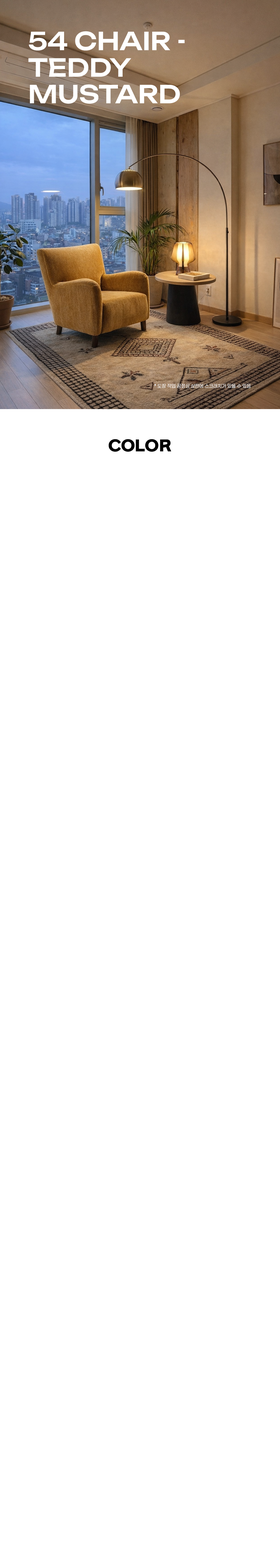
<style>
.page{position:relative;width:280px;height:1568px;background:#ffffff}
.page>*{position:absolute;margin:0}
.t1{font:24.5px/26.6px "Unbounded-Medium";color:#ffffff}
.t2{font:4.7px "Paperlogy-3Light";letter-spacing:0.02em;color:#ffffff}
.t3{font:14.9px "SBAggroB";color:#000000}
</style>
<div class="page">
<p class="t1" style="left:28px;top:31px;width:157px;height:73px">54 CHAIR - <br>TEDDY <br>MUSTARD</p>
<p class="t2" style="left:154px;top:384px;width:96px;height:4px">* 도장 작업 공정상 상판에 스크래치가 있을 수 있음</p>
<p class="t3" style="left:108px;top:439px;width:63px;height:13px">COLOR</p>
</div>
